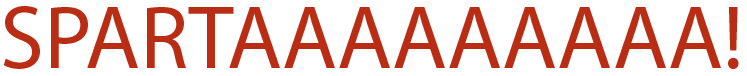
<style>
.page{position:relative;width:747px;height:76px;background:#ffffff}
.page>*{position:absolute;margin:0}
.t1{font:90px "MyriadPro-Regular";color:#ba2d14}
</style>
<div class="page">
<p class="t1" style="left:3px;top:6px;width:736px;height:63px">SPARTAAAAAAAAA!</p>
</div>
